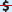
<style>
.page{position:relative;width:12px;height:12px;background:#d4effc}
.page>*{position:absolute;margin:0}
.t1{font:15.3px "BTitrBold";color:#231f20}
</style>
<div class="page">
<p class="t1" style="left:2px;top:0px;width:7px;height:13px">$</p>
</div>
